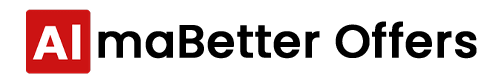
<style>
.page{position:relative;width:500px;height:83px;background:#ffffff}
.page>*{position:absolute;margin:0}
.t1{font:46px "Poppins-Medium";color:#000000;font-weight:bold}
</style>
<div class="page">
<p class="t1" style="left:98px;top:21px;width:379px;height:38px">maBetter Offers</p>
</div>
